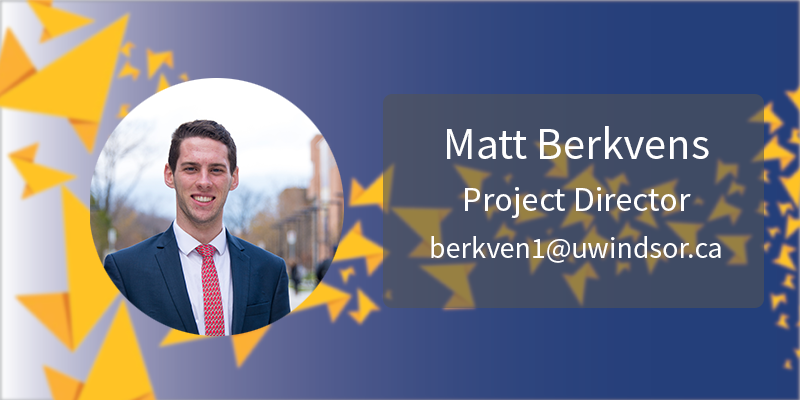
<style>
.page{position:relative;width:800px;height:400px}
.page>*{position:absolute;margin:0}
.t1{font:45px "SourceSansPro-Regular";color:#ffffff}
.t2{font:35px "SourceSansPro-Regular";color:#ffffff}
.t3{font:30px "SourceSansPro-Regular";color:#ffffff}
</style>
<div class="page">
<p class="t1" style="left:447px;top:126px;width:262px;height:33px">Matt Berkvens</p>
<p class="t2" style="left:465px;top:187px;width:226px;height:31px">Project Director</p>
<p class="t3" style="left:431px;top:236px;width:290px;height:27px">berkven1@uwindsor.ca</p>
</div>
